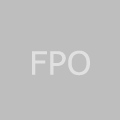
<style>
.page{position:relative;width:120px;height:120px;background:#bebebe}
.page>*{position:absolute;margin:0}
.t1{font:32px "Verdana";color:#e0e0e0}
</style>
<div class="page">
<p class="t1" style="left:32px;top:50px;width:58px;height:26px">FPO</p>
</div>
